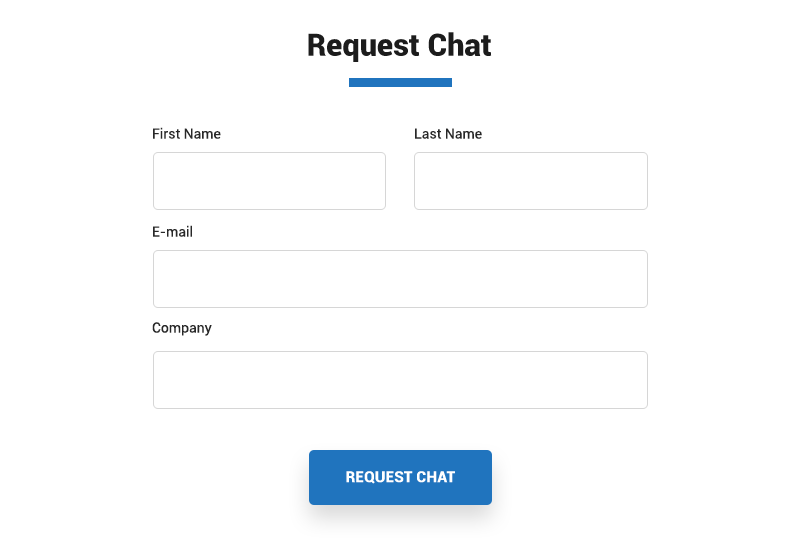
<style>
.page{position:relative;width:800px;height:546px;background:#ffffff}
.page>*{position:absolute;margin:0}
.t1{font:31.1px "Roboto-Black";color:#1c1c1c}
.t2{font:14px "Roboto-Regular";color:#282828}
.t3{font:15.5px "Roboto-Black";color:#ffffff}
</style>
<div class="page">
<p class="t1" style="left:308px;top:32px;width:184px;height:30px">Request Chat</p>
<p class="t2" style="left:153px;top:127px;width:68px;height:12px">First Name</p>
<p class="t2" style="left:415px;top:128px;width:67px;height:11px">Last Name</p>
<p class="t2" style="left:153px;top:225px;width:39px;height:12px">E-mail</p>
<p class="t2" style="left:152px;top:322px;width:60px;height:14px">Company</p>
<p class="t3" style="left:346px;top:471px;width:109px;height:13px">REQUEST CHAT</p>
</div>
